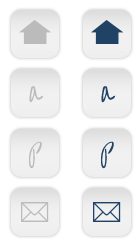
<style>
.page{position:relative;width:140px;height:250px;background:#ffffff}
.page>*{position:absolute;margin:0}
.t1{font:24px "OvertheRainbow";color:#bbbbbb}
.t2{font:24px "OvertheRainbow";color:#1f4265}
</style>
<div class="page">
<p class="t1" style="left:29px;top:86px;width:15px;height:17px">a</p>
<p class="t2" style="left:101px;top:86px;width:15px;height:17px">a</p>
<p class="t1" style="left:29px;top:141px;width:13px;height:28px">p</p>
<p class="t2" style="left:101px;top:141px;width:13px;height:28px">p</p>
</div>
